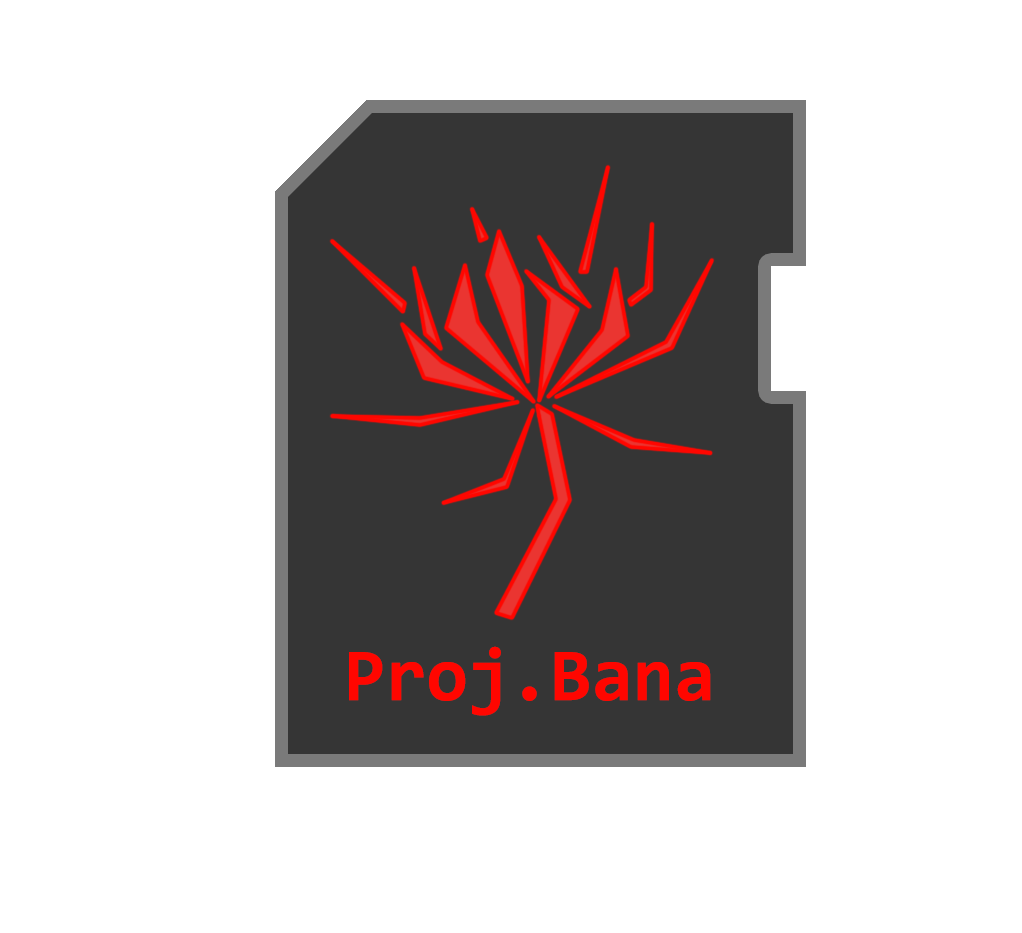
<style>
.page{position:relative;width:1022px;height:933px;background:#ffffff}
.page>*{position:absolute;margin:0}
.t1{font:75px "Consolas-Bold";color:#ff0600}
</style>
<div class="page">
<p class="t1" style="left:349px;top:646px;width:362px;height:70px">Proj.Bana</p>
</div>
